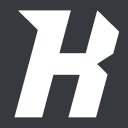
<style>
.page{position:relative;width:128px;height:128px;background:#36393e}
.page>*{position:absolute;margin:0}
.t1{font:144px "JerseySharp";color:#ffffff}
</style>
<div class="page">
<p class="t1" style="left:14px;top:10px;width:105px;height:108px">k</p>
</div>
